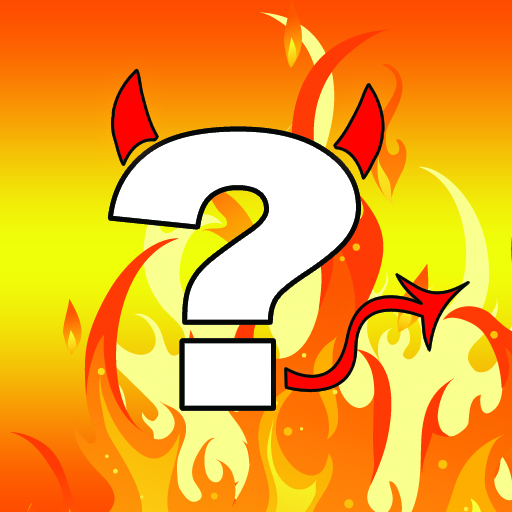
<style>
.page{position:relative;width:512px;height:512px}
.page>*{position:absolute;margin:0}
.t1{font:383.2px "Arial-Black";color:#ffffff;scale:1.2 1}
</style>
<div class="page">
<p class="t1" style="left:110px;top:129px;width:249px;height:280px">?</p>
</div>
